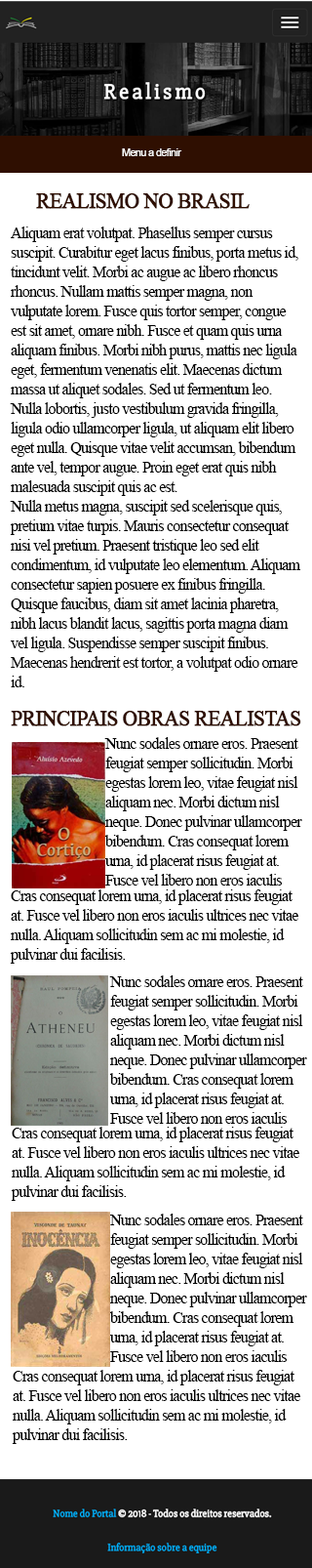
<style>
.page{position:relative;width:312px;height:1568px;background:#ffffff}
.page>*{position:absolute;margin:0}
.t1{font:10.7px "ArialMT";letter-spacing:-0.05em;color:#ffffff}
.t2{font:21.5px "TimesNewRomanPSMT";letter-spacing:-0.05em;color:#2f0f01;font-weight:bold}
.t3{font:16.1px/19.5px "TimesNewRomanPSMT";letter-spacing:-0.05em;color:#000000}
</style>
<div class="page">
<p class="t1" style="left:122px;top:148px;width:61px;height:8px">Menu a definir</p>
<p class="t2" style="left:36px;top:193px;width:214px;height:16px">REALISMO NO BRASIL</p>
<p class="t3" style="left:10px;top:227px;width:291px;height:460px">Aliquam erat volutpat. Phasellus semper cursus suscipit. Curabitur eget lacus finibus, porta metus id, tincidunt velit. Morbi ac augue ac libero rhoncus rhoncus. Nullam mattis semper magna, non vulputate lorem. Fusce quis tortor semper, congue est sit amet, ornare nibh. Fusce et quam quis urna aliquam finibus. Morbi nibh purus, mattis nec ligula eget, fermentum venenatis elit. Maecenas dictum massa ut aliquet sodales. Sed ut fermentum leo. Nulla lobortis, justo vestibulum gravida fringilla, ligula odio ullamcorper ligula, ut aliquam elit libero eget nulla. Quisque vitae velit accumsan, bibendum ante vel, tempor augue. Proin eget erat quis nibh malesuada suscipit quis ac est.<br>Nulla metus magna, suscipit sed scelerisque quis, pretium vitae turpis. Mauris consectetur consequat nisi vel pretium. Praesent tristique leo sed elit condimentum, id vulputate leo elementum. Aliquam consectetur sapien posuere ex finibus fringilla. Quisque faucibus, diam sit amet lacinia pharetra, nibh lacus blandit lacus, sagittis porta magna diam vel ligula. Suspendisse semper suscipit finibus. Maecenas hendrerit est tortor, a volutpat odio ornare id.</p>
<p class="t2" style="left:11px;top:711px;width:291px;height:15px">PRINCIPAIS OBRAS REALISTAS</p>
<p class="t3" style="left:104px;top:737px;width:199px;height:149px">Nunc sodales ornare eros. Praesent feugiat semper sollicitudin. Morbi egestas lorem leo, vitae feugiat nisl aliquam nec. Morbi dictum nisl neque. Donec pulvinar ullamcorper <br>bibendum. Cras consequat lorem urna, id placerat risus feugiat at. Fusce vel libero non eros iaculis</p>
<p class="t3" style="left:10px;top:889px;width:289px;height:75px">Cras consequat lorem urna, id placerat risus feugiat at. Fusce vel libero non eros iaculis ultrices nec vitae nulla. Aliquam sollicitudin sem ac mi molestie, id pulvinar dui facilisis.</p>
<p class="t3" style="left:109px;top:975px;width:199px;height:149px">Nunc sodales ornare eros. Praesent feugiat semper sollicitudin. Morbi egestas lorem leo, vitae feugiat nisl aliquam nec. Morbi dictum nisl neque. Donec pulvinar ullamcorper <br>bibendum. Cras consequat lorem urna, id placerat risus feugiat at. Fusce vel libero non eros iaculis</p>
<p class="t3" style="left:11px;top:1127px;width:289px;height:74px">Cras consequat lorem urna, id placerat risus feugiat at. Fusce vel libero non eros iaculis ultrices nec vitae nulla. Aliquam sollicitudin sem ac mi molestie, id pulvinar dui facilisis.</p>
<p class="t3" style="left:109px;top:1214px;width:199px;height:148px">Nunc sodales ornare eros. Praesent feugiat semper sollicitudin. Morbi egestas lorem leo, vitae feugiat nisl aliquam nec. Morbi dictum nisl neque. Donec pulvinar ullamcorper <br>bibendum. Cras consequat lorem urna, id placerat risus feugiat at. Fusce vel libero non eros iaculis</p>
<p class="t3" style="left:12px;top:1370px;width:289px;height:74px">Cras consequat lorem urna, id placerat risus feugiat at. Fusce vel libero non eros iaculis ultrices nec vitae nulla. Aliquam sollicitudin sem ac mi molestie, id pulvinar dui facilisis.</p>
</div>
